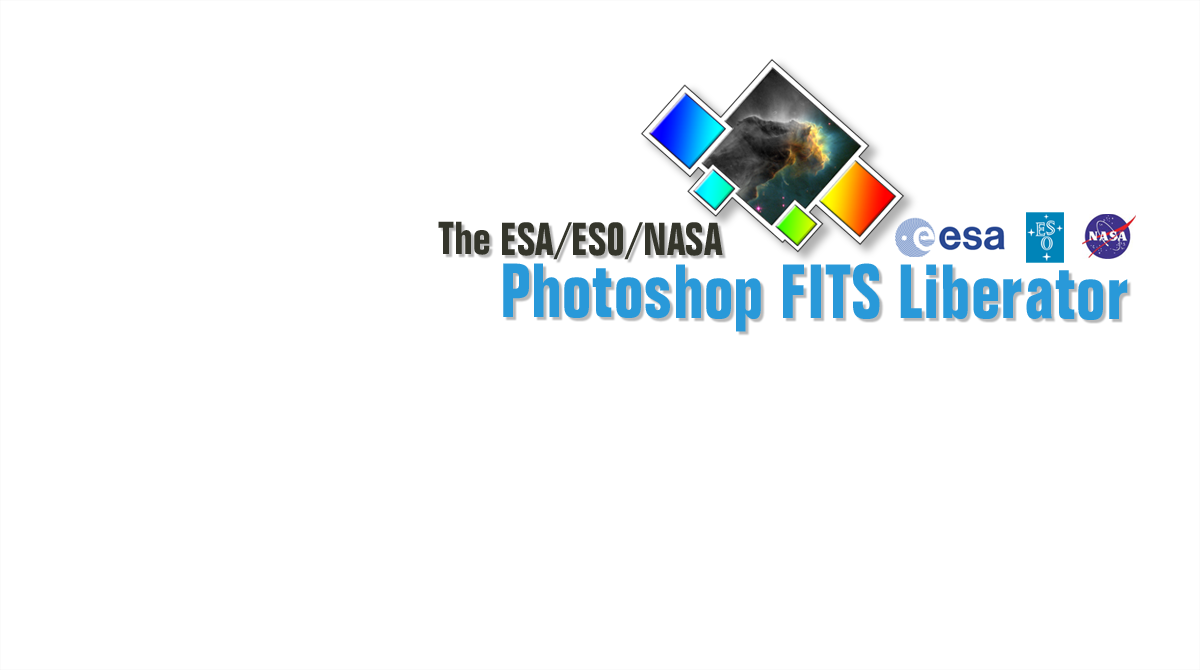
<style>
.page{position:relative;width:1200px;height:670px;background:#ffffff}
.page>*{position:absolute;margin:0}
.t1{font:75px/62.5px "FolioBT-BoldCondensed";color:#2999d9;scale:0.94 1}
.t2{font:45.2px/62.5px "FolioBT-BoldCondensed";color:#34352b;scale:0.94 1}
</style>
<div class="page">
<p class="t1" style="left:438px;top:221px;width:690px;height:111px"><span class="t2">The ESA/ESO/NASA <br></span>    Photoshop FITS Liberator</p>
</div>
